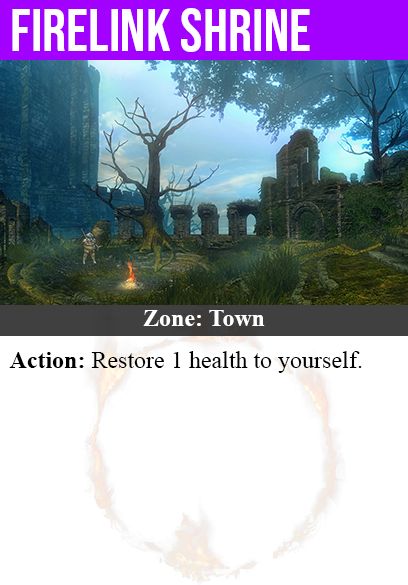
<style>
.page{position:relative;width:408px;height:585px;background:#ffffff}
.page>*{position:absolute;margin:0}
.t1{font:60px "BebasNeue-Regular";color:#ffffff}
.t2{font:24px "TimesNewRomanPS-BoldMT";color:#ffffff}
.t3{font:24px "TimesNewRomanPSMT";color:#000000}
.t4{font:24px "TimesNewRomanPS-BoldMT";color:#000000}
</style>
<div class="page">
<p class="t1" style="left:12px;top:8px;width:298px;height:44px">firelink shrine</p>
<p class="t2" style="left:143px;top:310px;width:122px;height:16px">Zone: Town</p>
<p class="t3" style="left:9px;top:351px;width:353px;height:22px"><span class="t4">Action:</span> Restore 1 health to yourself.</p>
</div>
